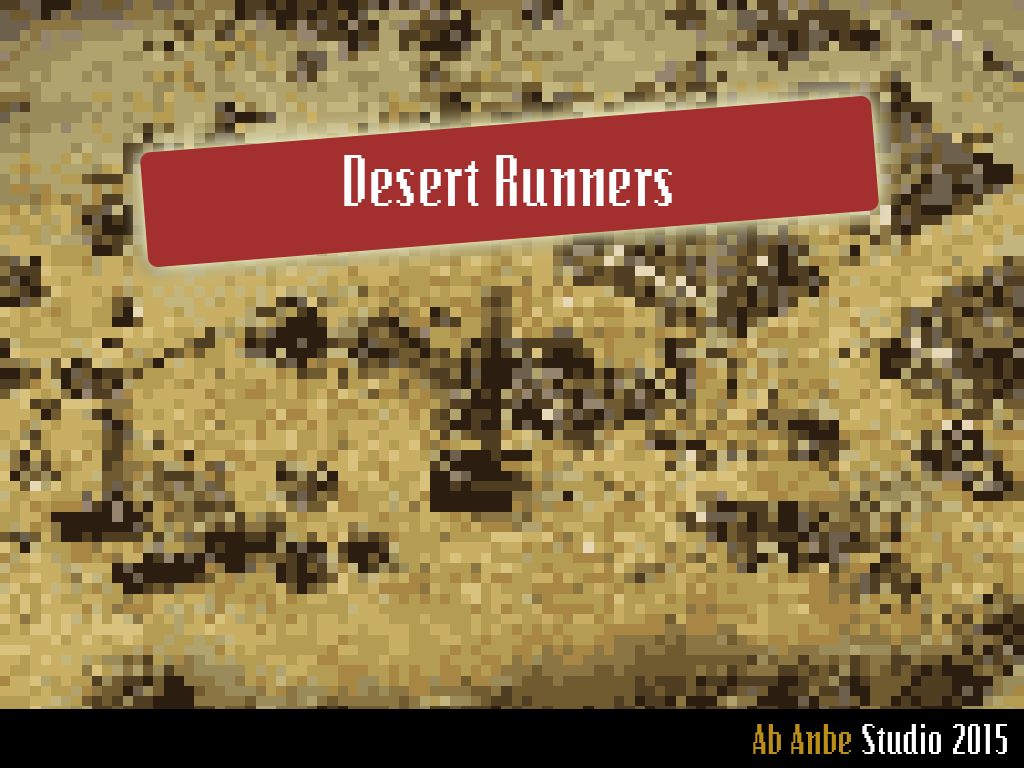
<style>
.page{position:relative;width:1024px;height:768px}
.page>*{position:absolute;margin:0}
.t1{font:72px "Bitmap";color:#ffffff}
.t2{font:42px "Bitmap";color:#ffffff}
.t3{font:42px "Bitmap";color:#ba8e18}
</style>
<div class="page">
<p class="t1" style="left:344px;top:155px;width:328px;height:51px">Desert Runners</p>
<p class="t2" style="left:753px;top:724px;width:254px;height:30px"><span class="t3">Ab Anbe</span> Studio 2015</p>
</div>
